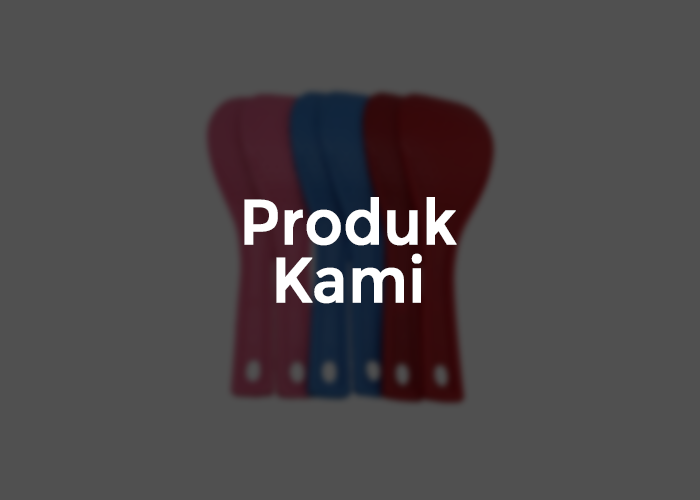
<style>
.page{position:relative;width:700px;height:500px;background:#505050}
.page>*{position:absolute;margin:0}
.t1{font:63.6px/58.5px "Montserrat-Regular";color:#ffffff;font-weight:bold;scale:0.91 1}
</style>
<div class="page">
<p class="t1" style="left:244px;top:197px;width:213px;height:107px;text-align:center">Produk<br>Kami</p>
</div>
